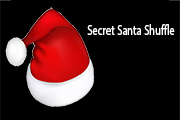
<style>
.page{position:relative;width:180px;height:120px;background:#000000}
.page>*{position:absolute;margin:0}
.t1{font:14.4px "MyriadPro-Regular";color:#ffffff;scale:0.73 1}
</style>
<div class="page">
<p class="t1" style="left:87px;top:24px;width:88px;height:11px">Secret Santa Shuffle</p>
</div>
